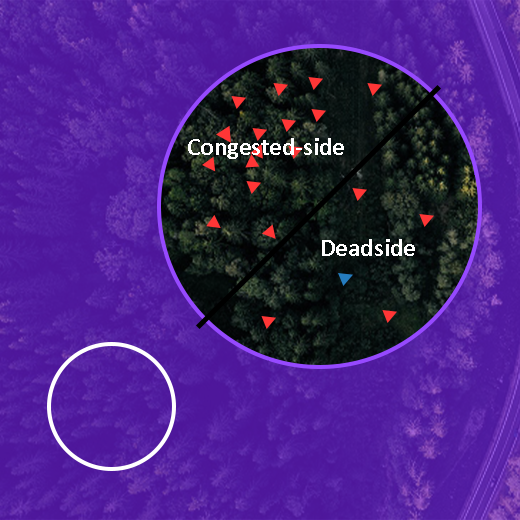
<style>
.page{position:relative;width:520px;height:520px}
.page>*{position:absolute;margin:0}
.t1{font:25px "Calibri-Bold";color:#ffffff}
</style>
<div class="page">
<p class="t1" style="left:188px;top:138px;width:156px;height:21px">Congested-side</p>
<p class="t1" style="left:322px;top:239px;width:93px;height:17px">Deadside</p>
</div>
